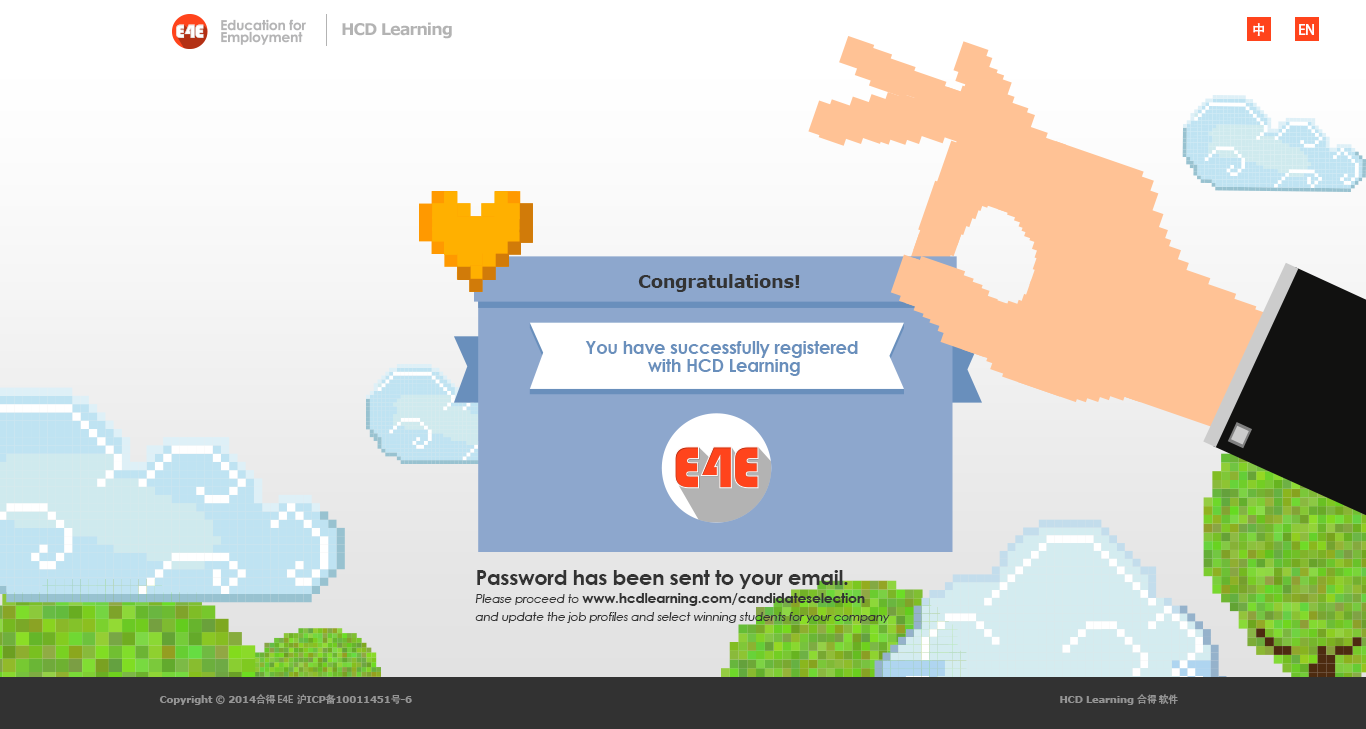
<style>
.page{position:relative;width:1366px;height:729px}
.page>*{position:absolute;margin:0}
.t1{font:16.3px "Verdana-Bold";letter-spacing:-0.06em;color:#b3b3b3}
.t2{font:14px "AdobeHeitiStd-Regular";letter-spacing:-0.06em;color:#ffffff}
.t3{font:18px "Verdana-Bold";letter-spacing:-0.02em;color:#333333}
.t4{font:18px/17.9px "CenturyGothic-Bold";letter-spacing:-0.02em;color:#698fbc}
.t5{font:12px/17.9px "CenturyGothic-Italic";letter-spacing:-0.02em;color:#333333}
.t6{font:21px/17.9px "CenturyGothic-Bold";letter-spacing:-0.02em;color:#333333}
.t7{font:14px/17.9px "CenturyGothic-Bold";letter-spacing:-0.02em;color:#333333}
.t8{font:10px "Verdana-Bold";letter-spacing:-0.02em;color:#949494}
.t9{font:10px "AdobeHeitiStd-Regular";letter-spacing:-0.02em;color:#949494}
</style>
<div class="page">
<p class="t1" style="left:342px;top:22px;width:110px;height:17px">HCD Learning</p>
<p class="t2" style="left:1253px;top:23px;width:11px;height:13px">中</p>
<p class="t2" style="left:1299px;top:24px;width:15px;height:11px">EN</p>
<p class="t3" style="left:638px;top:274px;width:162px;height:18px">Congratulations!</p>
<p class="t4" style="left:585px;top:341px;width:273px;height:35px;text-align:center">You have successfully registered <br>with HCD Learning</p>
<p class="t5" style="left:475px;top:570px;width:415px;height:53px"><span class="t6">Password has been sent to your email. <br></span>Please proceed to <span class="t7">www.hcdlearning.com/candidateselection<br></span>and update the job profiles and select winning students for your company</p>
<p class="t8" style="left:159px;top:694px;width:253px;height:11px">Copyright © 2014<span class="t9">合得 E4E 沪</span>ICP<span class="t9">备</span>10011451<span class="t9">号</span>-6</p>
<p class="t8" style="left:1060px;top:694px;width:118px;height:11px">HCD Learning <span class="t9">合得 软件</span></p>
</div>
